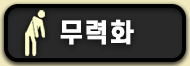
<style>
.page{position:relative;width:190px;height:66px;background:#292929}
.page>*{position:absolute;margin:0}
.t1{font:25.4px "S-CoreDream-6Bold";color:#fefefe;font-weight:bold}
</style>
<div class="page">
<p class="t1" style="left:60px;top:19px;width:74px;height:26px">무력화</p>
</div>
